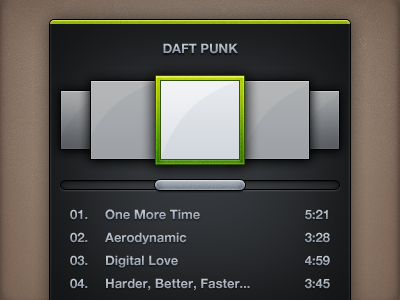
<style>
.page{position:relative;width:400px;height:300px}
.page>*{position:absolute;margin:0}
.t1{font:13px "HelveticaNeue-Bold";color:#a4aeb9;text-transform:uppercase}
.t2{font:13px "HelveticaNeue-Bold";color:#a4aeb9}
</style>
<div class="page">
<p class="t1" style="left:163px;top:43px;width:75px;height:11px">Daft Punk</p>
<p class="t1" style="left:70px;top:209px;width:18px;height:11px">01.</p>
<p class="t2" style="left:105px;top:209px;width:95px;height:11px">One More Time</p>
<p class="t2" style="left:305px;top:209px;width:23px;height:11px">5:21</p>
<p class="t1" style="left:70px;top:232px;width:18px;height:11px">02.</p>
<p class="t2" style="left:105px;top:232px;width:82px;height:13px">Aerodynamic</p>
<p class="t2" style="left:305px;top:232px;width:25px;height:11px">3:28</p>
<p class="t1" style="left:70px;top:255px;width:18px;height:11px">03.</p>
<p class="t2" style="left:106px;top:255px;width:72px;height:13px">Digital Love</p>
<p class="t2" style="left:305px;top:255px;width:25px;height:11px">4:59</p>
<p class="t1" style="left:70px;top:278px;width:18px;height:11px">04.</p>
<p class="t2" style="left:106px;top:278px;width:144px;height:13px">Harder, Better, Faster...</p>
<p class="t2" style="left:305px;top:278px;width:25px;height:11px">3:45</p>
</div>
